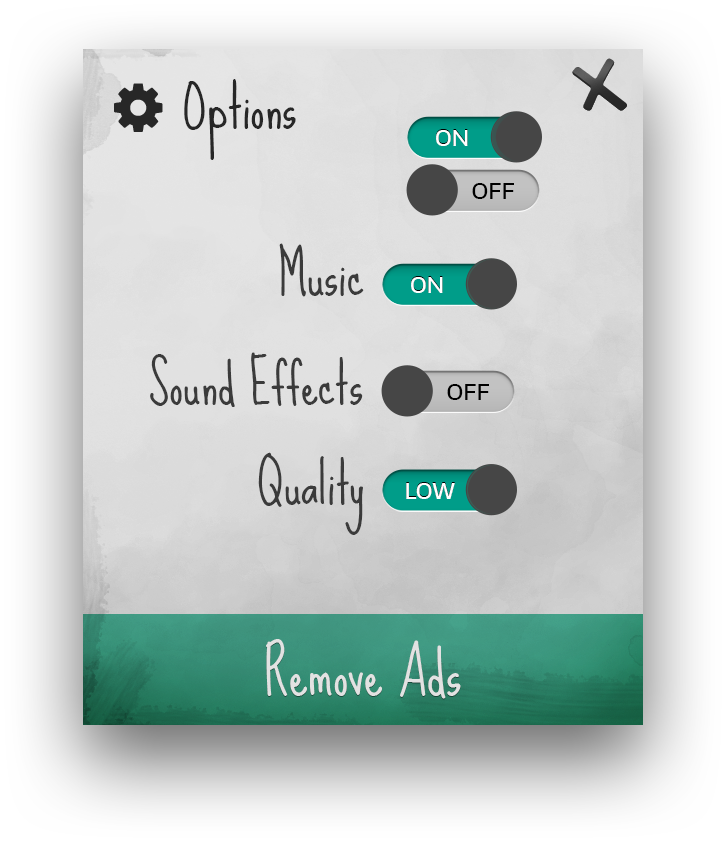
<style>
.page{position:relative;width:727px;height:843px}
.page>*{position:absolute;margin:0}
.t1{font:56.8px "SueEllenFrancisco";color:#272727}
.t2{font:21.9px "EncodeSans-Medium";color:#ffffff;text-transform:uppercase}
.t3{font:21.9px "EncodeSans-Medium";color:#000000;text-transform:uppercase}
.t4{font:55.5px "SueEllenFrancisco";color:#3b3b3b}
.t5{font:60px "SueEllenFrancisco";color:#e2e2e2}
</style>
<div class="page">
<p class="t1" style="left:184px;top:79px;width:112px;height:81px">Options</p>
<p class="t2" style="left:436px;top:130px;width:32px;height:16px">ON</p>
<p class="t3" style="left:472px;top:183px;width:42px;height:16px">off</p>
<p class="t4" style="left:279px;top:243px;width:85px;height:54px">Music</p>
<p class="t4" style="left:150px;top:352px;width:213px;height:55px">Sound Effects</p>
<p class="t4" style="left:258px;top:452px;width:105px;height:83px">Quality</p>
<p class="t5" style="left:266px;top:639px;width:195px;height:60px">Remove Ads</p>
</div>
